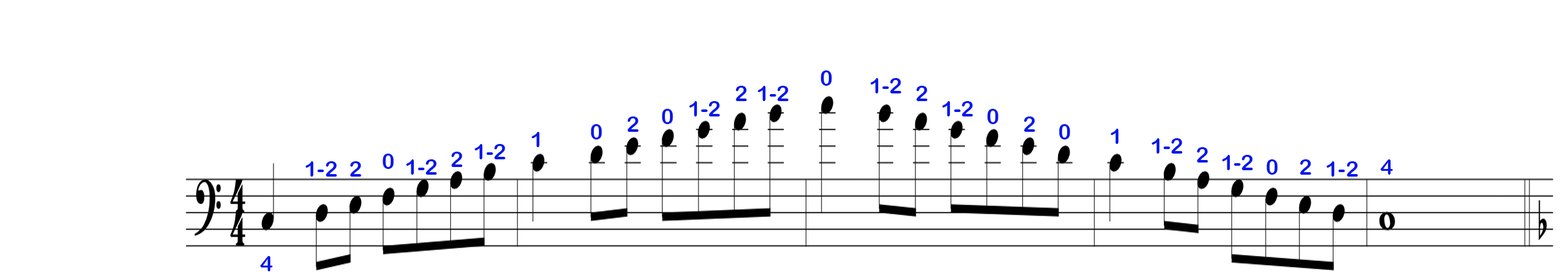
<style>
.page{position:relative;width:1568px;height:279px;background:#ffffff}
.page>*{position:absolute;margin:0}
.t1{font:21.8px "ArialRoundedMTBold";color:#0417ec}
</style>
<div class="page">
<p class="t1" style="left:821px;top:70px;width:11px;height:16px">0</p>
<p class="t1" style="left:735px;top:86px;width:12px;height:15px">2</p>
<p class="t1" style="left:758px;top:86px;width:30px;height:15px">1-2</p>
<p class="t1" style="left:870px;top:78px;width:31px;height:16px">1-2</p>
<p class="t1" style="left:916px;top:86px;width:11px;height:15px">2</p>
<p class="t1" style="left:689px;top:101px;width:31px;height:16px">1-2</p>
<p class="t1" style="left:942px;top:101px;width:31px;height:16px">1-2</p>
<p class="t1" style="left:662px;top:109px;width:11px;height:15px">0</p>
<p class="t1" style="left:987px;top:109px;width:12px;height:15px">0</p>
<p class="t1" style="left:591px;top:124px;width:11px;height:16px">0</p>
<p class="t1" style="left:627px;top:117px;width:12px;height:15px">2</p>
<p class="t1" style="left:1024px;top:117px;width:11px;height:15px">2</p>
<p class="t1" style="left:1059px;top:124px;width:11px;height:16px">0</p>
<p class="t1" style="left:532px;top:132px;width:8px;height:15px">1</p>
<p class="t1" style="left:1111px;top:129px;width:8px;height:15px">1</p>
<p class="t1" style="left:475px;top:144px;width:30px;height:15px">1-2</p>
<p class="t1" style="left:1152px;top:138px;width:30px;height:16px">1-2</p>
<p class="t1" style="left:1196px;top:147px;width:12px;height:16px">2</p>
<p class="t1" style="left:306px;top:161px;width:31px;height:16px">1-2</p>
<p class="t1" style="left:350px;top:161px;width:11px;height:16px">2</p>
<p class="t1" style="left:382px;top:154px;width:12px;height:15px">0</p>
<p class="t1" style="left:406px;top:159px;width:31px;height:16px">1-2</p>
<p class="t1" style="left:451px;top:152px;width:11px;height:15px">2</p>
<p class="t1" style="left:1222px;top:155px;width:31px;height:15px">1-2</p>
<p class="t1" style="left:1266px;top:159px;width:12px;height:16px">0</p>
<p class="t1" style="left:1300px;top:159px;width:11px;height:16px">2</p>
<p class="t1" style="left:1327px;top:161px;width:31px;height:16px">1-2</p>
<p class="t1" style="left:1380px;top:159px;width:13px;height:16px">4</p>
<p class="t1" style="left:260px;top:256px;width:13px;height:16px">4</p>
</div>
